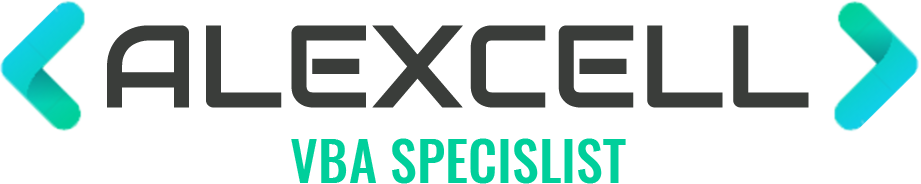
<style>
.page{position:relative;width:921px;height:184px;background:#ffffff}
.page>*{position:absolute;margin:0}
.t1{font:116.7px "Audiowide-Regular";color:#3a3d3a}
.t2{font:54.2px "Oswald-Medium";color:#00d09c}
</style>
<div class="page">
<p class="t1" style="left:107px;top:25px;width:702px;height:83px">ALEXCELL</p>
<p class="t2" style="left:291px;top:138px;width:335px;height:46px">VBA SPECISLIST</p>
</div>
